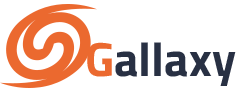
<style>
.page{position:relative;width:237px;height:89px;background:#ffffff}
.page>*{position:absolute;margin:0}
.t1{font:48px "TitilliumWeb-Bold";color:#283043}
.t2{font:48px "TitilliumWeb-Bold";color:#eb692f}
</style>
<div class="page">
<p class="t1" style="left:87px;top:42px;width:149px;height:44px"><span class="t2">G</span>allaxy</p>
</div>
